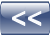
<style>
.page{position:relative;width:50px;height:35px}
.page>*{position:absolute;margin:0}
.t1{font:32px "Calibri-Bold";color:#f8fafc}
</style>
<div class="page">
<p class="t1" style="left:12px;top:11px;width:30px;height:15px">&lt;&lt;</p>
</div>
